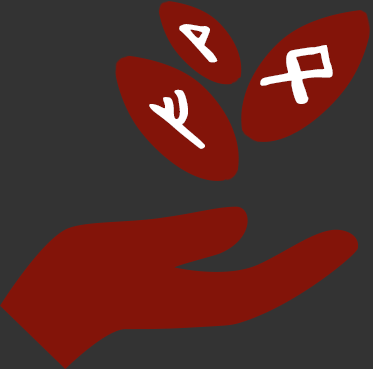
<style>
.page{position:relative;width:373px;height:369px;background:#333333}
.page>*{position:absolute;margin:0}
.t1{font:85.3px "CustomFuthark";letter-spacing:0.01em;color:#ffffff;scale:1.11 1}
.t2{font:108.8px "CustomFuthark";letter-spacing:0.01em;color:#ffffff;scale:0.96 1}
.t3{font:116.6px "CustomFuthark";letter-spacing:0.01em;color:#ffffff;scale:0.89 1}
</style>
<div class="page">
<p class="t1" style="left:179px;top:24px;width:39px;height:39px;rotate:-26deg">V</p>
<p class="t2" style="left:260px;top:45px;width:73px;height:59px;rotate:26deg">O</p>
<p class="t3" style="left:149px;top:89px;width:56px;height:60px;rotate:-32deg">F</p>
</div>
